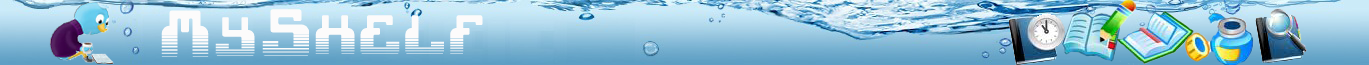
<style>
.page{position:relative;width:1369px;height:65px}
.page>*{position:absolute;margin:0}
.t1{font:48px "Cheek2cheekfadedByShkdezign";color:#fcfbfb}
.t2{font:40px "Cheek2cheekfadedByShkdezign";color:#fcfbfb}
</style>
<div class="page">
<p class="t1" style="left:161px;top:10px;width:48px;height:47px">M</p>
<p class="t2" style="left:215px;top:17px;width:40px;height:39px">y</p>
<p class="t1" style="left:262px;top:9px;width:47px;height:47px">S</p>
<p class="t2" style="left:315px;top:15px;width:168px;height:39px">Helf</p>
</div>
